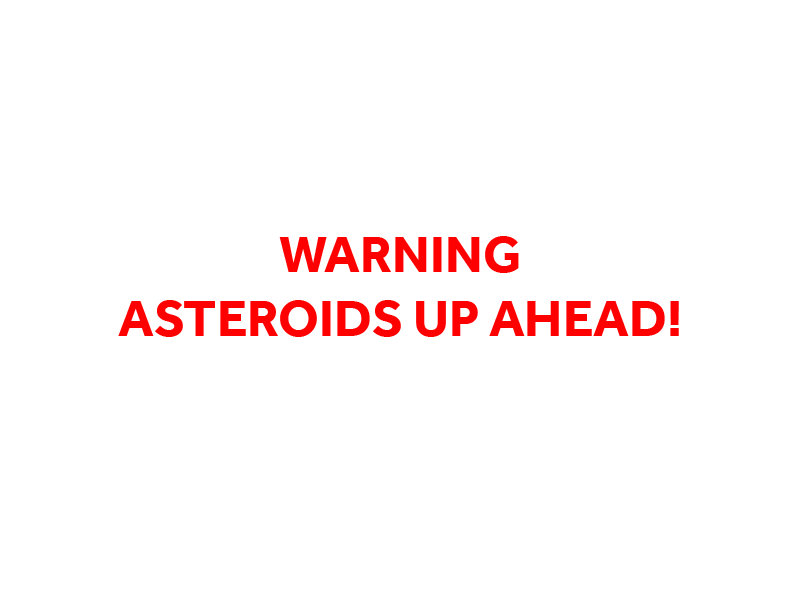
<style>
.page{position:relative;width:800px;height:600px;background:#ffffff}
.page>*{position:absolute;margin:0}
.t1{font:53px "Effra-Bold";color:#ff0000}
</style>
<div class="page">
<p class="t1" style="left:118px;top:236px;width:561px;height:101px;text-align:center">WARNING<br>ASTEROIDS UP AHEAD!</p>
</div>
